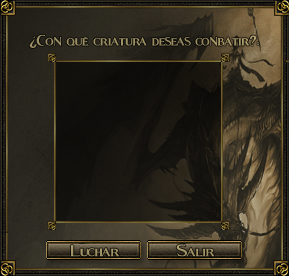
<style>
.page{position:relative;width:289px;height:276px}
.page>*{position:absolute;margin:0}
.t1{font:28.9px "Fleet-Street";color:#9c9063;scale:0.94 1}
.t2{font:30px "Fleet-Street";color:#a19466}
.t3{font:30px "Fleet-Street";color:#a29466}
</style>
<div class="page">
<p class="t1" style="left:29px;top:34px;width:230px;height:14px">¿Con qué criatura deseas conbatir?:</p>
<p class="t2" style="left:70px;top:245px;width:50px;height:12px">Luchar</p>
<p class="t3" style="left:176px;top:244px;width:39px;height:13px">Salir</p>
</div>
